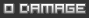
<style>
.page{position:relative;width:89px;height:18px;background:#333333}
.page>*{position:absolute;margin:0}
.t1{font:14px "Hooge0553"}
</style>
<div class="page">
<p class="t1" style="left:4px;top:4px;width:81px;height:9px">0 DAMAGE</p>
<p class="t1" style="left:4px;top:4px;width:81px;height:9px">0 DAMAGE</p>
<p class="t1" style="left:4px;top:4px;width:81px;height:9px">0 DAMAGE</p>
<p class="t1" style="left:4px;top:4px;width:81px;height:9px">0 DAMAGE</p>
</div>
